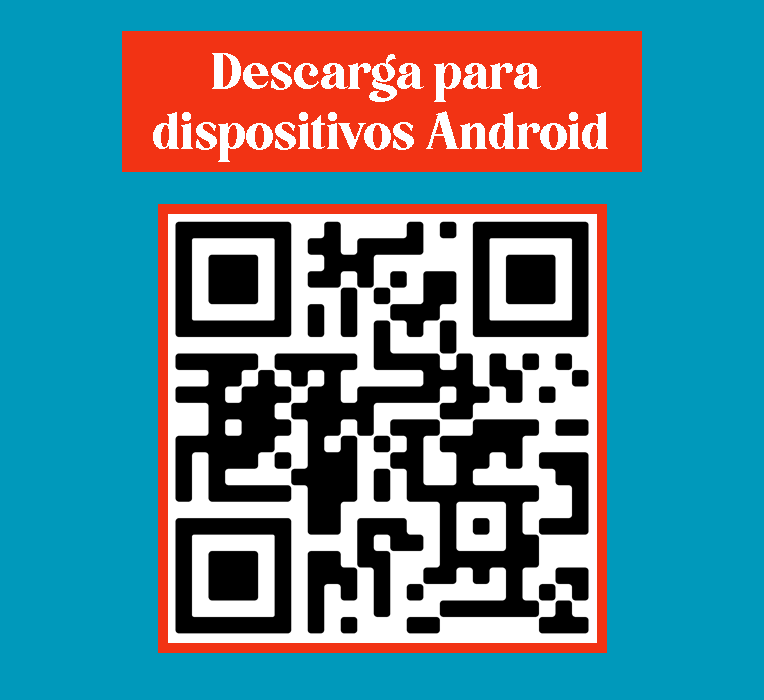
<style>
.page{position:relative;width:764px;height:700px;background:#0099bb}
.page>*{position:absolute;margin:0}
.t1{font:50px "5thAvenue";color:#feffff}
</style>
<div class="page">
<p class="t1" style="left:153px;top:53px;width:455px;height:109px;text-align:center">Descarga para <br>dispositivos Android</p>
</div>
